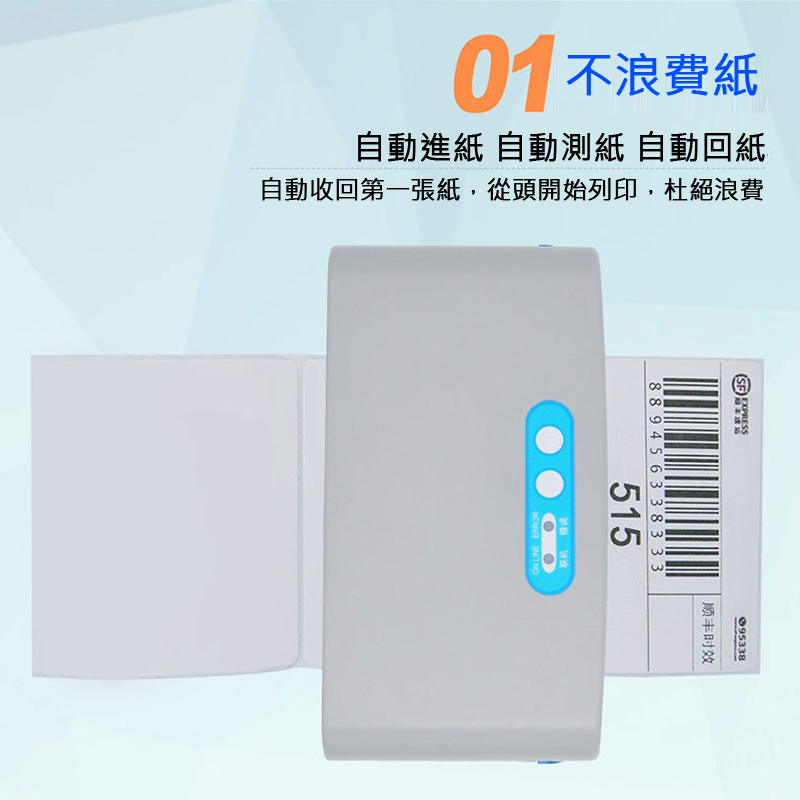
<style>
.page{position:relative;width:800px;height:800px}
.page>*{position:absolute;margin:0}
.t1{font:48px "MicrosoftJhengHeiRegular";color:#004eff;font-weight:bold}
.t2{font:32.2px "MicrosoftJhengHeiRegular";color:#000000;font-weight:bold}
.t3{font:24.6px "MicrosoftJhengHeiRegular";color:#000000;font-weight:bold}
</style>
<div class="page">
<p class="t1" style="left:567px;top:53px;width:191px;height:43px">不浪費紙</p>
<p class="t2" style="left:358px;top:131px;width:407px;height:31px">自動進紙 自動測紙 自動回紙</p>
<p class="t3" style="left:262px;top:177px;width:501px;height:24px">自動收回第一張紙，從頭開始列印，杜絕浪費</p>
</div>
